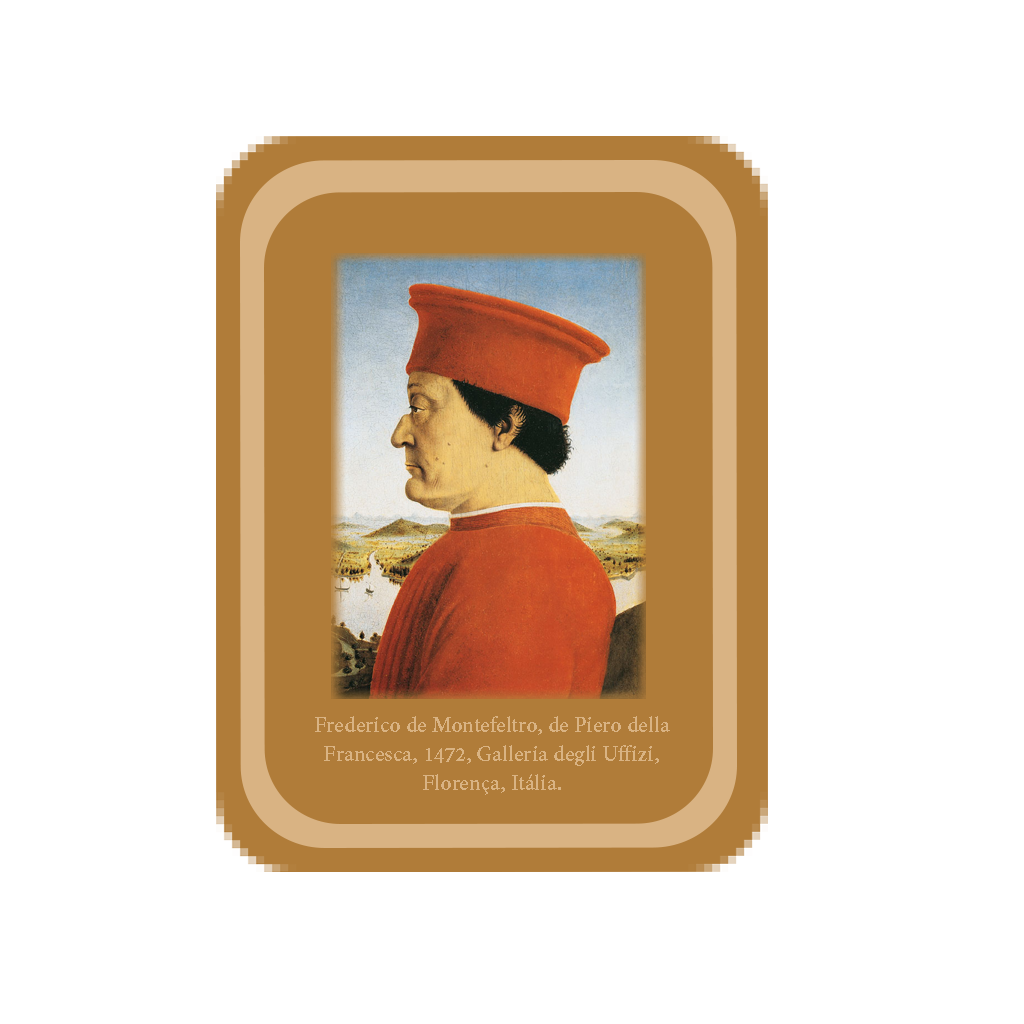
<style>
.page{position:relative;width:1024px;height:1024px;background:#ffffff}
.page>*{position:absolute;margin:0}
.t1{font:24.2px "AdobeDevanagari-Bold";color:#d9b383}
</style>
<div class="page">
<p class="t1" style="left:315px;top:716px;width:355px;height:79px;text-align:center">Frederico de Montefeltro, de Piero della Francesca, 1472, Galleria degli Uffizi, Florença, Itália.</p>
</div>
